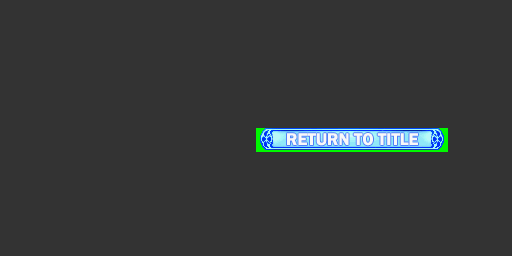
<style>
.page{position:relative;width:512px;height:256px;background:#333333}
.page>*{position:absolute;margin:0}
.t1{font:17.3px "FranklinGothic-Demi";color:#f8f8f8;text-transform:uppercase}
</style>
<div class="page">
<p class="t1" style="left:287px;top:133px;width:131px;height:13px">rETURN TO TITLE</p>
</div>
